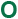
<style>
.page{position:relative;width:18px;height:19px;background:#ffffff}
.page>*{position:absolute;margin:0}
.t1{font:33.3px "TrebuchetMS";color:#0a7248}
</style>
<div class="page">
<p class="t1" style="left:1px;top:1px;width:16px;height:17px">o</p>
</div>
